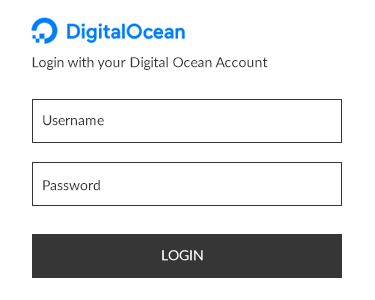
<style>
.page{position:relative;width:375px;height:300px;background:#ffffff}
.page>*{position:absolute;margin:0}
.t1{font:14px "Lato-Regular";color:#363636}
.t2{font:14px "Lato-Regular";color:#ffffff}
</style>
<div class="page">
<p class="t1" style="left:32px;top:57px;width:236px;height:13px">Login with your Digital Ocean Account</p>
<p class="t1" style="left:43px;top:115px;width:61px;height:11px">Username</p>
<p class="t1" style="left:43px;top:180px;width:57px;height:11px">Password</p>
<p class="t2" style="left:162px;top:250px;width:41px;height:11px">LOGIN</p>
</div>
